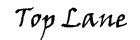
<style>
.page{position:relative;width:140px;height:40px;background:#ffffff}
.page>*{position:absolute;margin:0}
.t1{font:26.7px "VinerHandITC";color:#000000}
</style>
<div class="page">
<p class="t1" style="left:15px;top:7px;width:112px;height:35px">Top Lane</p>
</div>
